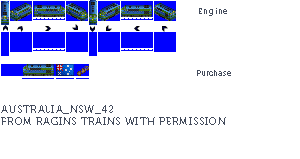
<style>
.page{position:relative;width:300px;height:159px;background:#ffffff}
.page>*{position:absolute;margin:0}
.t1{font:8px "Museo700-Regular";letter-spacing:0.075em;color:#444c5c}
.t2{font:8px "Museo700-Regular";color:#444c5c}
.t3{font:10px "Museo700-Regular";letter-spacing:0.075em;color:#444c5c;text-transform:uppercase}
</style>
<div class="page">
<p class="t1" style="left:199px;top:8px;width:28px;height:8px">Engine</p>
<p class="t2" style="left:197px;top:70px;width:34px;height:6px">Purchase</p>
<p class="t3" style="left:1px;top:105px;width:225px;height:20px">Australia_NSW_42<br>from ragins trains with permission</p>
</div>
